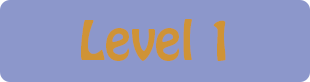
<style>
.page{position:relative;width:310px;height:82px;background:#8c97cb}
.page>*{position:absolute;margin:0}
.t1{font:48px "HoboStd";color:#cf9336}
</style>
<div class="page">
<p class="t1" style="left:81px;top:19px;width:145px;height:42px">Level 1</p>
</div>
